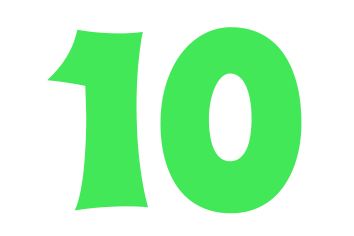
<style>
.page{position:relative;width:354px;height:236px;background:#ffffff}
.page>*{position:absolute;margin:0}
.t1{font:250px "SpicyRice-Regular";color:#43e858}
</style>
<div class="page">
<p class="t1" style="left:47px;top:27px;width:255px;height:187px">10</p>
</div>
